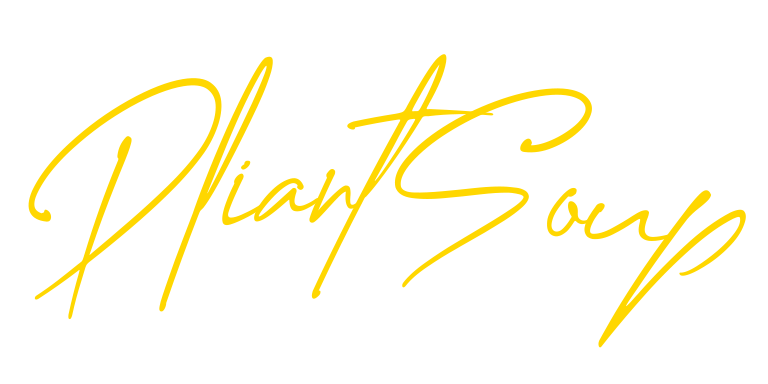
<style>
.page{position:relative;width:768px;height:384px;background:#ffffff}
.page>*{position:absolute;margin:0}
.t1{font:259.7px "CreattionDemo";color:#ffd700;scale:0.79 1}
</style>
<div class="page">
<p class="t1" style="left:28px;top:54px;width:718px;height:294px">PliantSoup</p>
</div>
